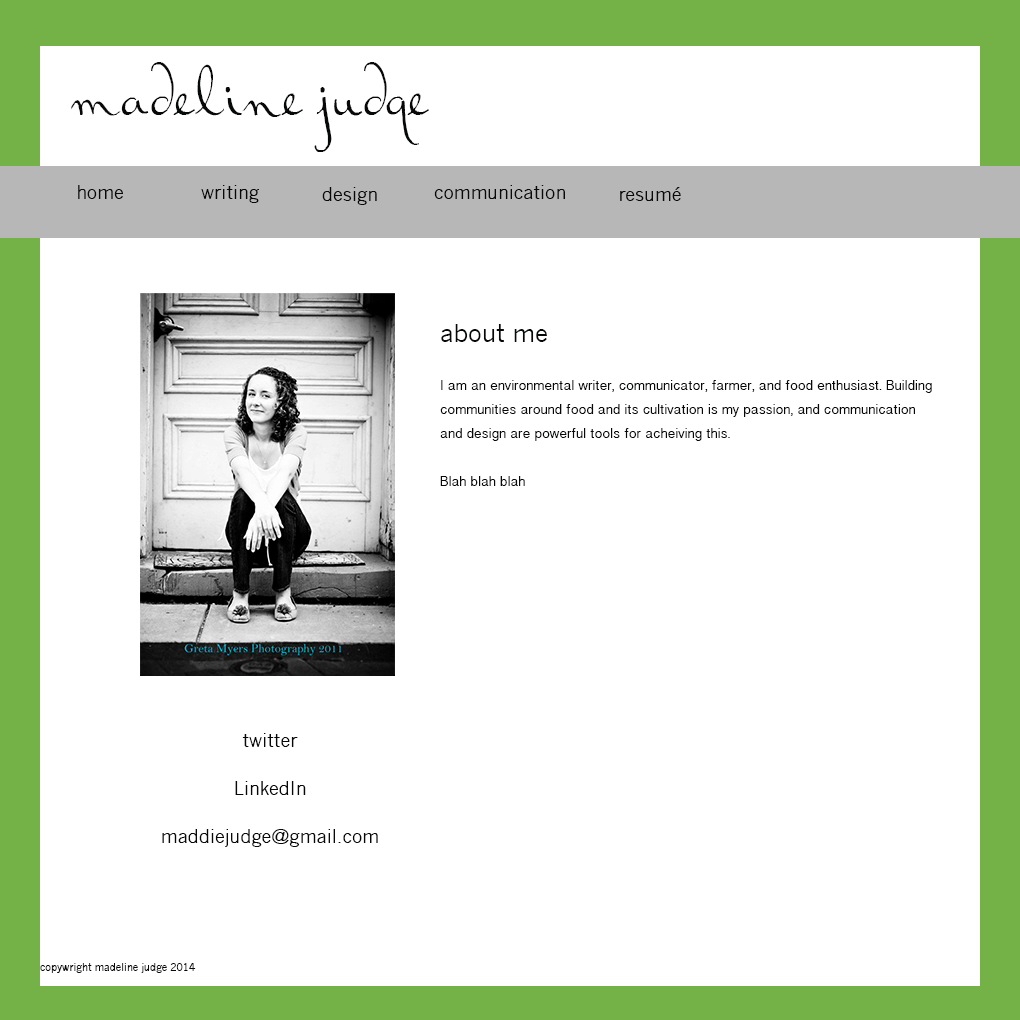
<style>
.page{position:relative;width:1020px;height:1020px;background:#ffffff}
.page>*{position:absolute;margin:0}
.t1{font:72px "RalphWalker";color:#070808}
.t2{font:18px "NewsGothicMT";color:#070808}
.t3{font:14px/24px "BanglaSangamMN";color:#070808}
.t4{font:24px/24px "NewsGothicMT";color:#070808}
.t5{font:18px/24px "NewsGothicMT";color:#070808}
.t6{font:10px "NewsGothicMT";color:#070808}
</style>
<div class="page">
<p class="t1" style="left:71px;top:62px;width:358px;height:90px">madeline judge</p>
<p class="t2" style="left:78px;top:185px;width:45px;height:14px">home</p>
<p class="t2" style="left:201px;top:185px;width:58px;height:18px">writing</p>
<p class="t2" style="left:434px;top:185px;width:131px;height:14px">communication</p>
<p class="t2" style="left:322px;top:187px;width:55px;height:18px">design</p>
<p class="t2" style="left:620px;top:187px;width:61px;height:14px">resumé</p>
<p class="t3" style="left:440px;top:324px;width:492px;height:162px"><span class="t4">about me<br><br></span>I am an environmental writer, communicator, farmer, and food enthusiast. Building communities around food and its cultivation is my passion, and communication and design are powerful tools for acheiving this.<br><br>Blah blah blah</p>
<p class="t5" style="left:162px;top:733px;width:216px;height:114px;text-align:center">twitter<br><br>LinkedIn<br><br>maddiejudge@gmail.com</p>
<p class="t6" style="left:40px;top:963px;width:156px;height:10px">copywright madeline judge 2014</p>
</div>
